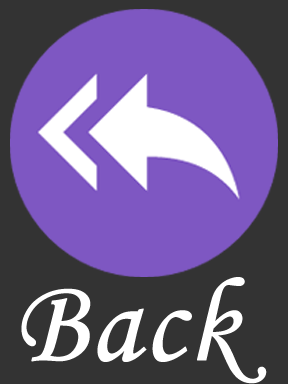
<style>
.page{position:relative;width:288px;height:384px;background:#333333}
.page>*{position:absolute;margin:0}
.t1{font:120px "MonotypeCorsiva";color:#ffffff;font-weight:bold}
</style>
<div class="page">
<p class="t1" style="left:21px;top:277px;width:246px;height:107px">Back</p>
</div>
